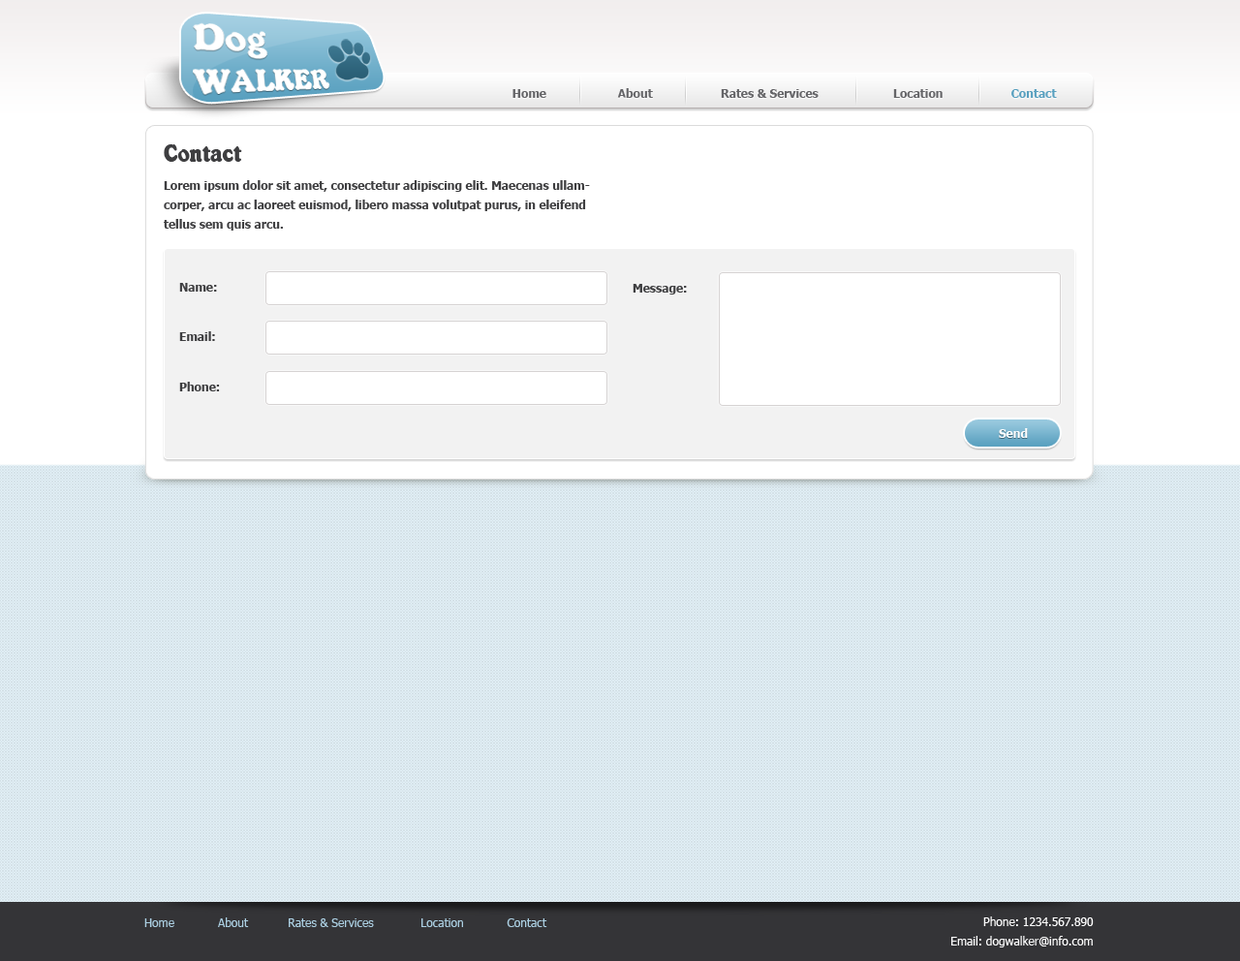
<style>
.page{position:relative;width:1240px;height:961px;background:#ffffff}
.page>*{position:absolute;margin:0}
.t1{font:11.6px "Tahoma-Bold";color:#656568}
.t2{font:11.6px "Tahoma-Bold";color:#59a0bf}
.t3{font:25.2px "KabarettSimple-Thin";color:#3e3e40}
.t4{font:11.6px/19.4px "Tahoma-Bold";color:#3e3e40}
.t5{font:11.6px "Tahoma-Bold";color:#3e3e40}
.t6{font:11.6px "Tahoma-Bold";color:#ffffff}
.t7{font:11.6px "Tahoma";color:#acd0e3}
.t8{font:11.6px/19.4px "Tahoma";color:#ffffff}
</style>
<div class="page">
<p class="t1" style="left:513px;top:88px;width:544px;height:10px">Home                     About                    Rates &amp; Services                      Location                  <span class="t2">  Contact</span></p>
<p class="t3" style="left:164px;top:144px;width:78px;height:18px">Contact</p>
<p class="t4" style="left:164px;top:180px;width:426px;height:51px">Lorem ipsum dolor sit amet, consectetur adipiscing elit. Maecenas ullamcorper, arcu ac laoreet euismod, libero massa volutpat purus, in eleifend tellus sem quis arcu.</p>
<p class="t5" style="left:179px;top:283px;width:38px;height:9px">Name:</p>
<p class="t5" style="left:633px;top:284px;width:54px;height:11px">Message:</p>
<p class="t5" style="left:179px;top:331px;width:36px;height:10px">Email:</p>
<p class="t5" style="left:179px;top:382px;width:41px;height:10px">Phone:</p>
<p class="t6" style="left:999px;top:428px;width:29px;height:10px">Send</p>
<p class="t7" style="left:144px;top:918px;width:404px;height:9px">Home            About           Rates &amp; Services             Location            Contact</p>
<p class="t8" style="left:952px;top:917px;width:142px;height:31px;text-align:right">Phone: 1234.567.890<br>Email: dogwalker@info.com</p>
</div>
